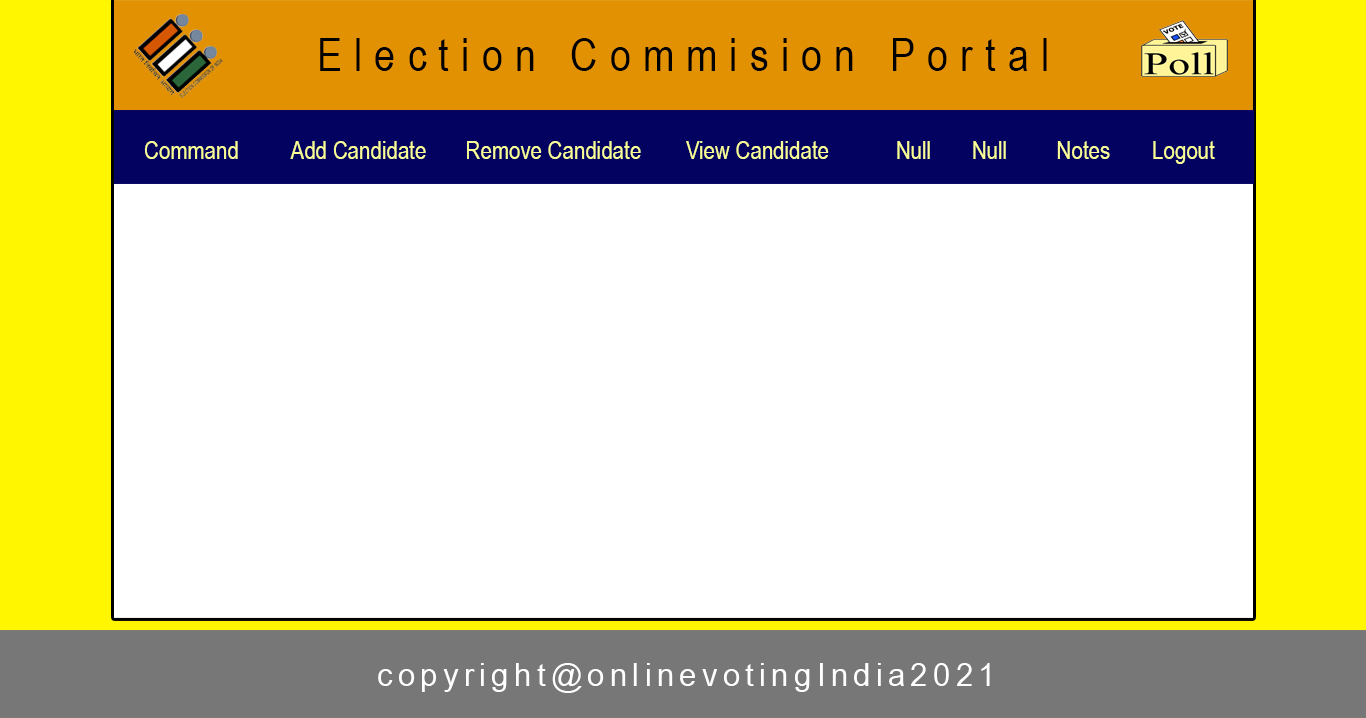
<style>
.page{position:relative;width:1366px;height:718px;background:#ffffff}
.page>*{position:absolute;margin:0}
.t1{font:45.8px "ArialNarrow";letter-spacing:0.265em;color:#000000}
.t2{font:25px "ArialNarrow";color:#f9ff96}
.t3{font:31.9px "ArialNarrow";letter-spacing:0.145em;color:#ffffff;scale:1.18 1}
</style>
<div class="page">
<p class="t1" style="left:320px;top:38px;width:727px;height:33px">Election Commision Portal</p>
<p class="t2" style="left:144px;top:141px;width:94px;height:18px">Command</p>
<p class="t2" style="left:290px;top:141px;width:136px;height:18px">Add Candidate</p>
<p class="t2" style="left:467px;top:141px;width:174px;height:18px">Remove Candidate</p>
<p class="t2" style="left:686px;top:141px;width:143px;height:18px">View Candidate</p>
<p class="t2" style="left:897px;top:141px;width:33px;height:18px">Null</p>
<p class="t2" style="left:973px;top:141px;width:33px;height:18px">Null</p>
<p class="t2" style="left:1057px;top:141px;width:53px;height:18px">Notes</p>
<p class="t2" style="left:1153px;top:141px;width:62px;height:23px">Logout</p>
<p class="t3" style="left:378px;top:663px;width:612px;height:30px">copyright@onlinevotingIndia2021</p>
</div>
